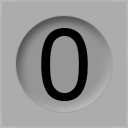
<style>
.page{position:relative;width:128px;height:128px;background:#acacac}
.page>*{position:absolute;margin:0}
.t1{font:100px "ArialMT";color:#000000}
</style>
<div class="page">
<p class="t1" style="left:41px;top:28px;width:47px;height:73px">0</p>
</div>
